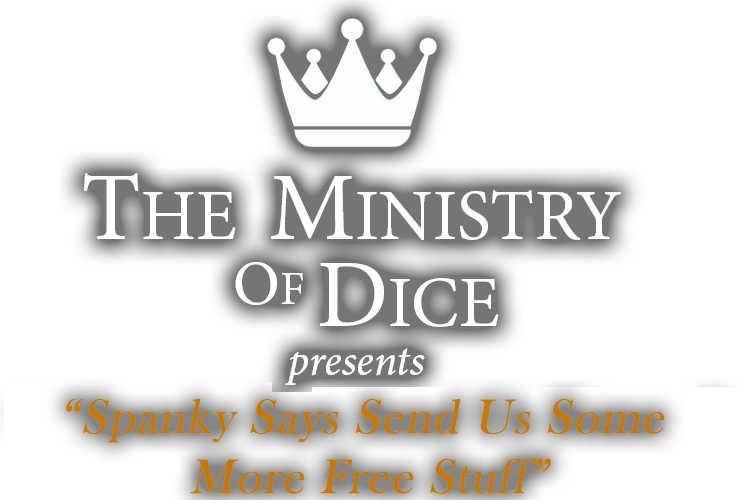
<style>
.page{position:relative;width:739px;height:500px;background:#ffffff}
.page>*{position:absolute;margin:0}
.t1{font:49.8px "BaskOldFace";color:#c4790f;font-weight:bold;font-style:italic}
</style>
<div class="page">
<p class="t1" style="left:66px;top:398px;width:599px;height:96px;text-align:center">“Spanky Says Send Us Some <br>More Free Stuff”</p>
</div>
